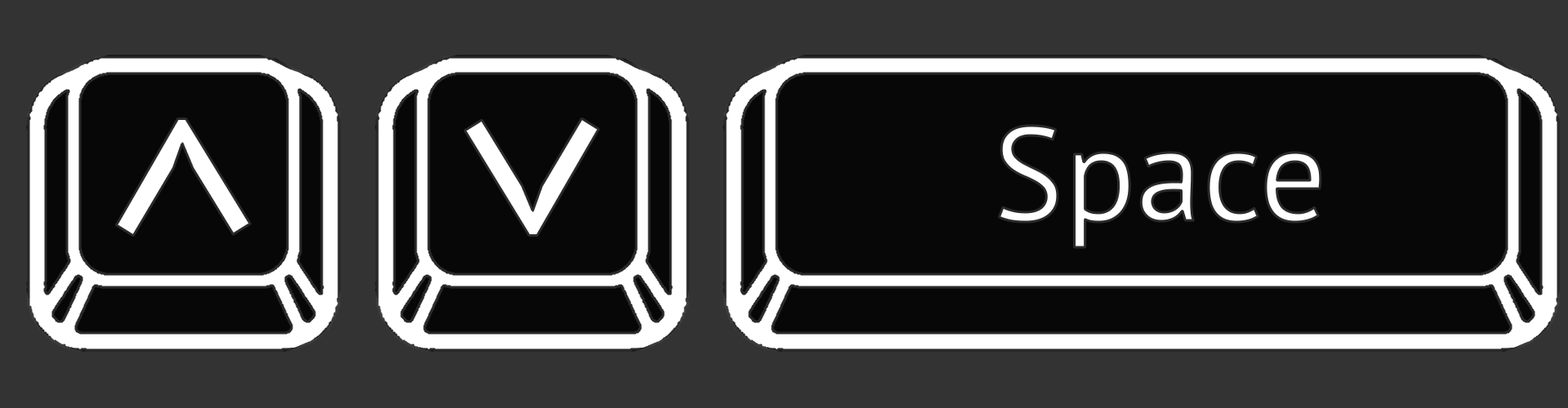
<style>
.page{position:relative;width:1568px;height:408px;background:#070707}
.page>*{position:absolute;margin:0}
.t1{font:277.9px "PTSans-Regular";color:#ffffff}
.t2{font:133.4px "PTSans-Regular";color:#ffffff}
</style>
<div class="page">
<p class="t1" style="left:116px;top:118px;width:135px;height:118px;rotate:-90deg">&gt;</p>
<p class="t1" style="left:465px;top:118px;width:134px;height:118px;rotate:90deg">&gt;</p>
<p class="t2" style="left:999px;top:126px;width:322px;height:121px">Space</p>
</div>
